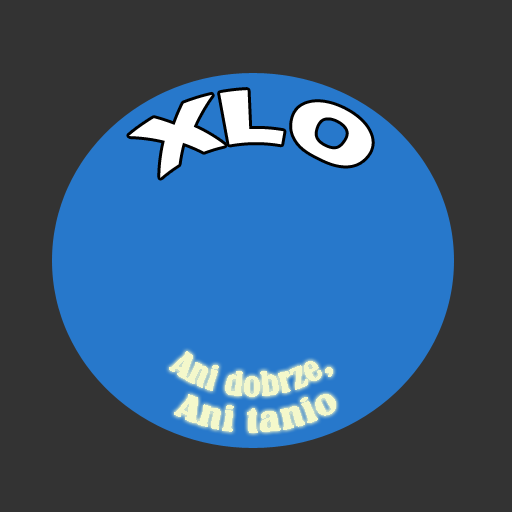
<style>
.page{position:relative;width:512px;height:512px;background:#333333}
.page>*{position:absolute;margin:0}
.t1{font:72px "Arial-Black";color:#ffffff}
.t2{font:30px "BernardMT-Condensed";color:#f4f8cb}
</style>
<div class="page">
<p class="t1" style="left:129px;top:90px;width:243px;height:88px">XLO</p>
<p class="t2" style="left:169px;top:351px;width:167px;height:82px;text-align:center">Ani dobrze,<br> Ani tanio</p>
</div>
